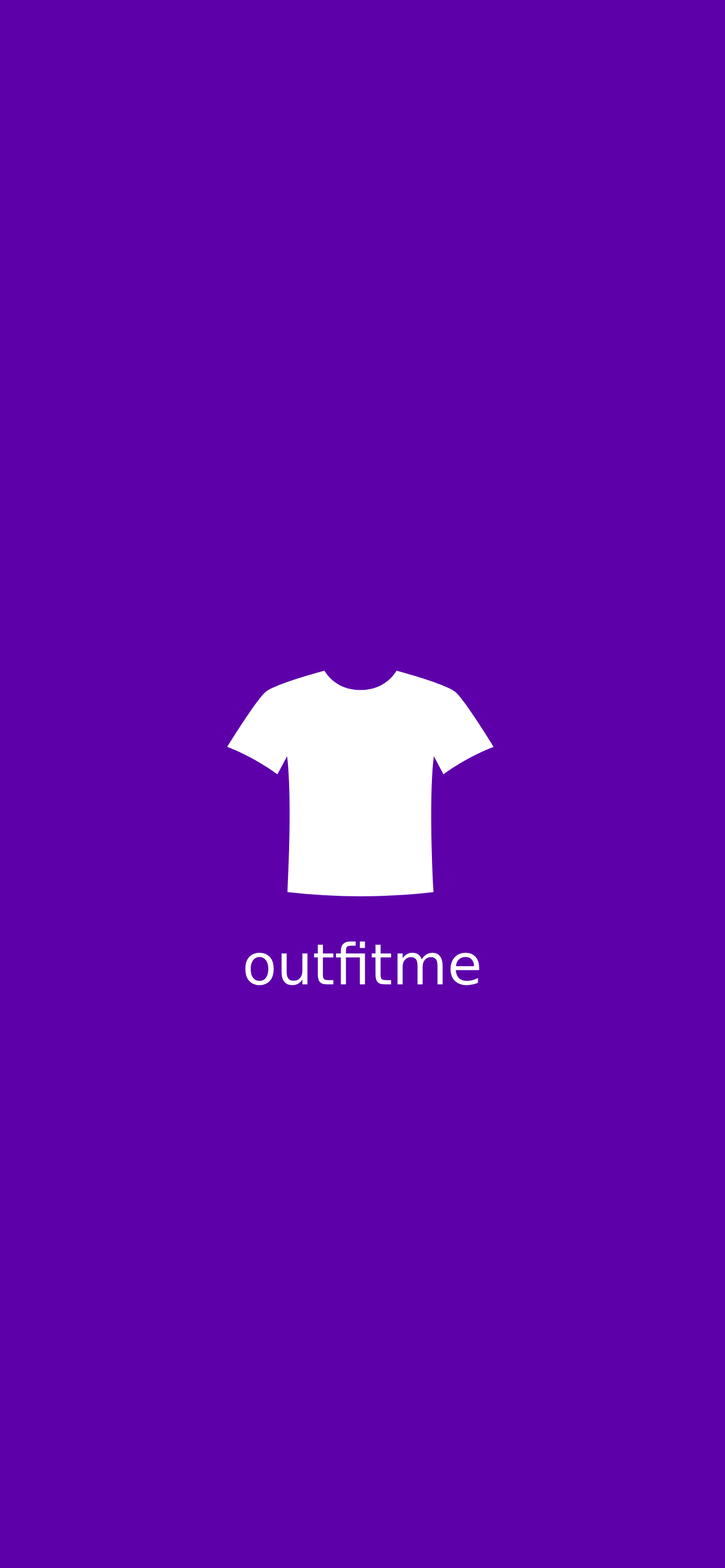
<style>
.page{position:relative;width:725px;height:1568px;background:#5d00aa}
.page>*{position:absolute;margin:0}
.t1{font:56.4px "DejaVuSans";color:#ffffff}
</style>
<div class="page">
<p class="t1" style="left:245px;top:941px;width:234px;height:45px">outfitme</p>
</div>
